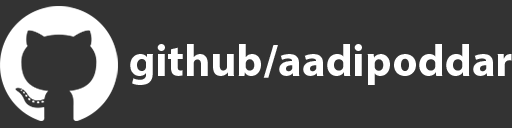
<style>
.page{position:relative;width:512px;height:128px;background:#333333}
.page>*{position:absolute;margin:0}
.t1{font:45px "MyriadPro-Bold";color:#ffffff}
</style>
<div class="page">
<p class="t1" style="left:130px;top:44px;width:382px;height:41px">github/aadipoddar</p>
</div>
